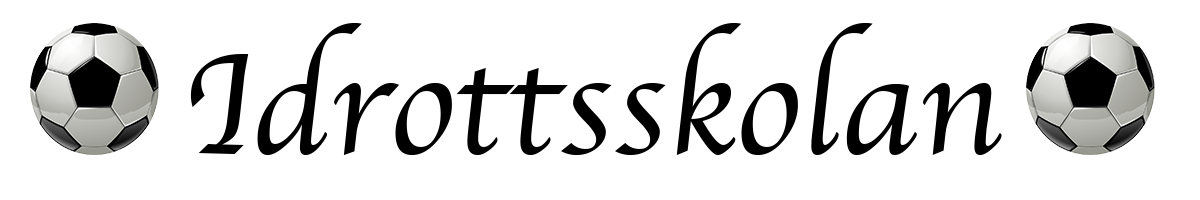
<style>
.page{position:relative;width:1200px;height:200px;background:#ffffff}
.page>*{position:absolute;margin:0}
.t1{font:150px "Apple-Chancery";color:#000000}
</style>
<div class="page">
<p class="t1" style="left:190px;top:23px;width:812px;height:132px">Idrottsskolan</p>
</div>
